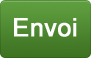
<style>
.page{position:relative;width:91px;height:59px}
.page>*{position:absolute;margin:0}
.t1{font:25px "ArialMT";color:#ffffff;font-weight:bold}
</style>
<div class="page">
<p class="t1" style="left:14px;top:18px;width:63px;height:19px">Envoi</p>
</div>
